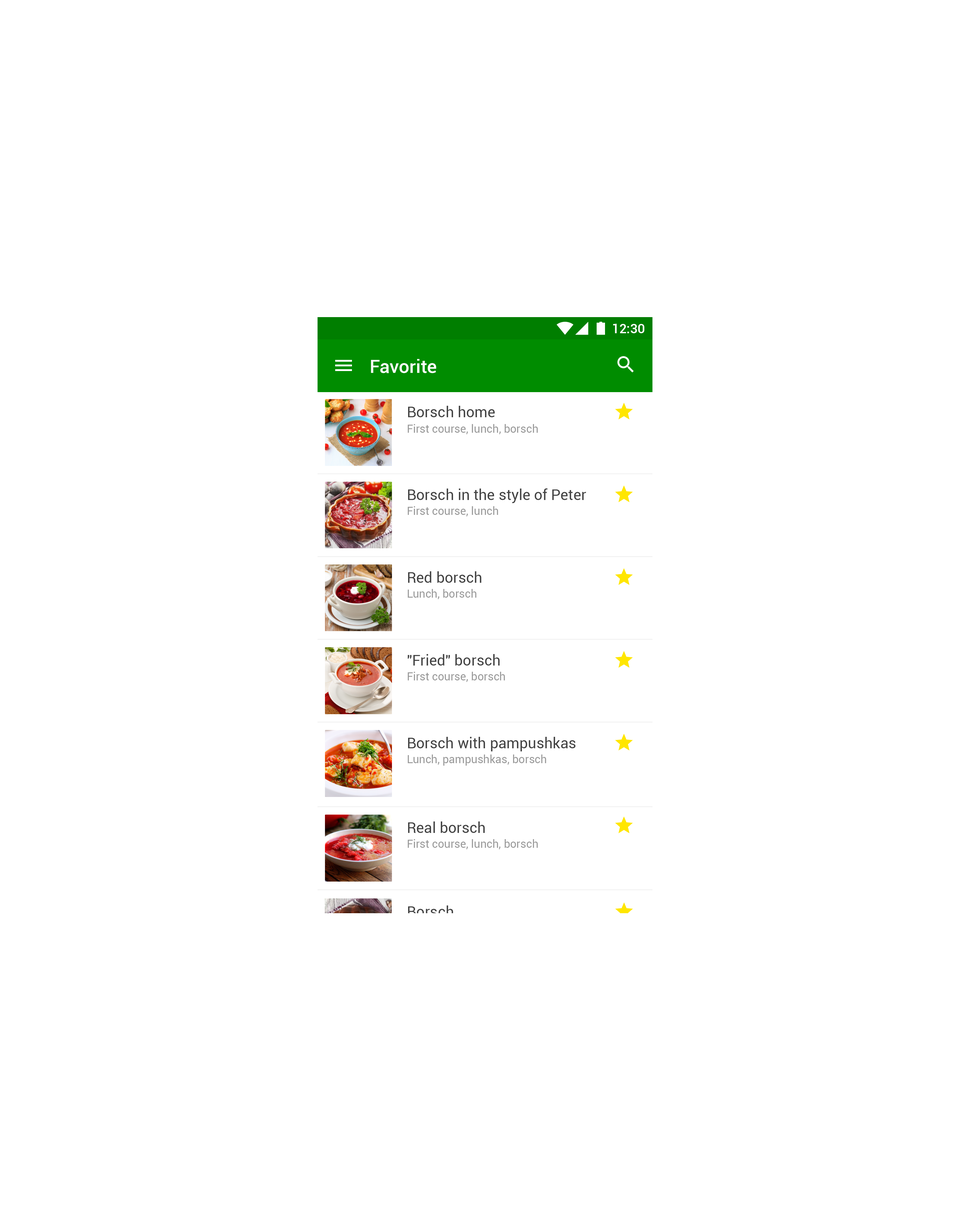
<style>
.page{position:relative;width:970px;height:1230px;background:#ffffff}
.page>*{position:absolute;margin:0}
.t1{font:13px "Roboto-Medium";color:#ffffff}
.t2{font:18.6px "Roboto-Medium";color:#ffffff}
.t3{font:14.9px "Roboto-Regular";color:#424242}
.t4{font:11.2px "Roboto-Regular";color:#999999}
.t5{font:14.9px "Roboto-Regular"}
</style>
<div class="page">
<p class="t1" style="left:613px;top:324px;width:31px;height:9px">12:30</p>
<p class="t2" style="left:371px;top:359px;width:65px;height:14px">Favorite</p>
<p class="t3" style="left:408px;top:406px;width:87px;height:11px">Borsch home</p>
<p class="t4" style="left:408px;top:424px;width:129px;height:10px">First course, lunch, borsch</p>
<p class="t3" style="left:408px;top:488px;width:178px;height:15px">Borsch in the style of Peter</p>
<p class="t4" style="left:408px;top:506px;width:90px;height:10px">First course, lunch</p>
<p class="t3" style="left:408px;top:571px;width:73px;height:12px">Red borsch</p>
<p class="t4" style="left:408px;top:589px;width:68px;height:10px">Lunch, borsch</p>
<p class="t3" style="left:408px;top:654px;width:91px;height:11px">"Fried" borsch</p>
<p class="t4" style="left:408px;top:672px;width:97px;height:10px">First course, borsch</p>
<p class="t3" style="left:408px;top:737px;width:167px;height:14px">Borsch with pampushkas</p>
<p class="t4" style="left:408px;top:754px;width:138px;height:12px">Lunch, pampushkas, borsch</p>
<p class="t3" style="left:408px;top:821px;width:76px;height:12px">Real borsch</p>
<p class="t4" style="left:408px;top:839px;width:129px;height:10px">First course, lunch, borsch</p>
<p class="t5" style="left:408px;top:905px;width:45px;height:12px">Borsch</p>
</div>
